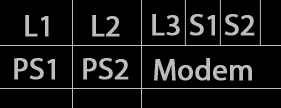
<style>
.page{position:relative;width:281px;height:108px;background:#000000}
.page>*{position:absolute;margin:0}
.t1{font:30px "MyriadPro-Regular";color:#bebdbd;font-weight:bold}
</style>
<div class="page">
<p class="t1" style="left:25px;top:15px;width:24px;height:22px">L1</p>
<p class="t1" style="left:92px;top:15px;width:28px;height:22px">L2</p>
<p class="t1" style="left:152px;top:14px;width:28px;height:22px">L3</p>
<p class="t1" style="left:189px;top:14px;width:26px;height:22px">S1</p>
<p class="t1" style="left:224px;top:14px;width:31px;height:22px">S2</p>
<p class="t1" style="left:14px;top:58px;width:41px;height:22px">PS1</p>
<p class="t1" style="left:83px;top:58px;width:46px;height:22px">PS2</p>
<p class="t1" style="left:154px;top:58px;width:98px;height:23px">Modem</p>
</div>
